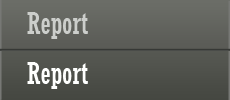
<style>
.page{position:relative;width:230px;height:100px}
.page>*{position:absolute;margin:0}
.t1{font:30px "Rockwell-Condensed";color:#cccecb}
.t2{font:30px "Rockwell-Condensed";color:#fefffe}
</style>
<div class="page">
<p class="t1" style="left:27px;top:12px;width:61px;height:27px">Report</p>
<p class="t2" style="left:27px;top:62px;width:61px;height:27px">Report</p>
</div>
